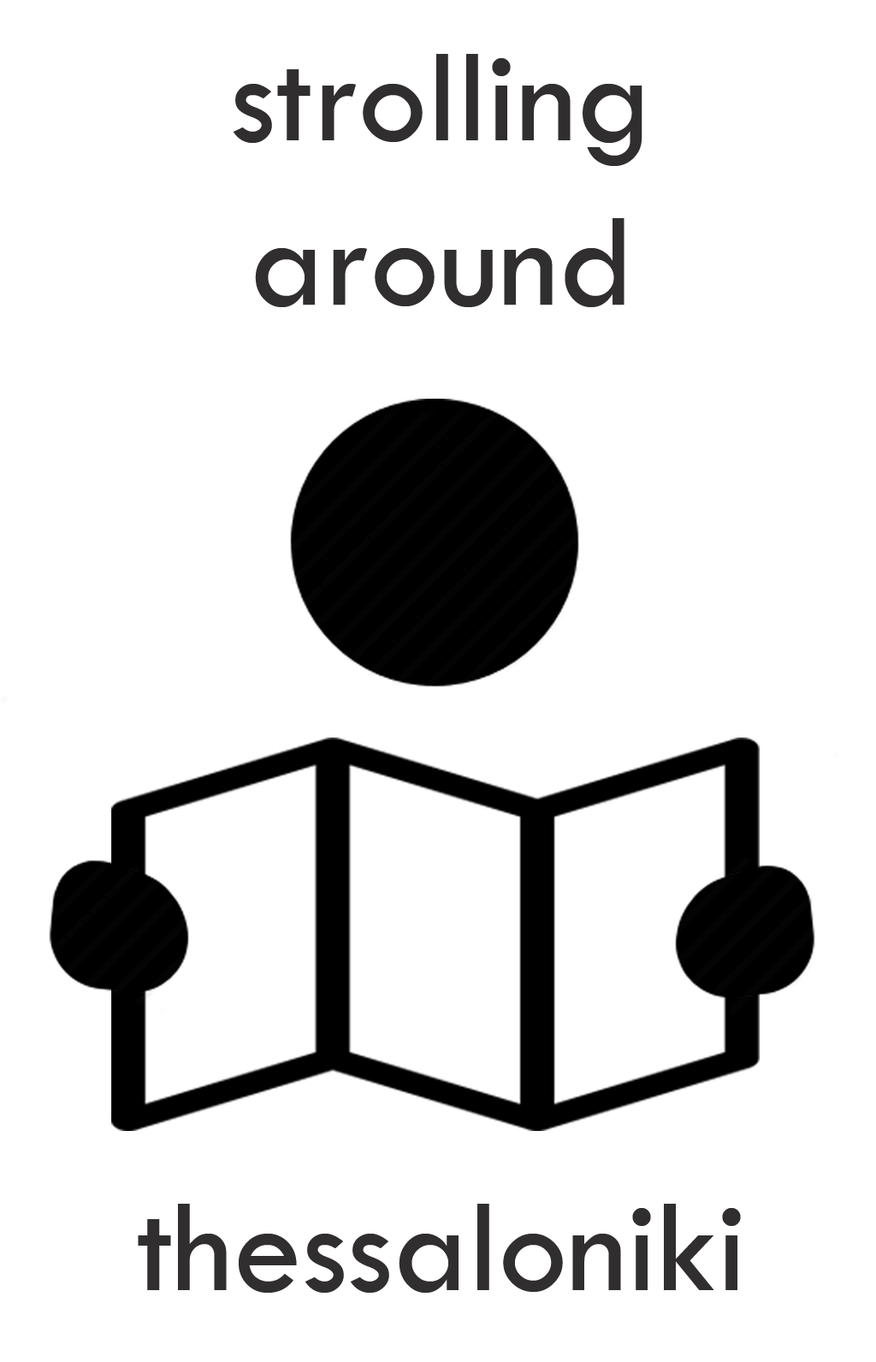
<style>
.page{position:relative;width:876px;height:1362px;background:#ffffff}
.page>*{position:absolute;margin:0}
.t1{font:136.9px "TwCenMT-Regular";color:#302e2e}
</style>
<div class="page">
<p class="t1" style="left:138px;top:54px;width:603px;height:1238px;text-align:center">strolling<br>around<br><br><br><br><br><br>thessaloniki</p>
</div>
